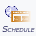
<style>
.page{position:relative;width:36px;height:36px;background:#f7f8fa}
.page>*{position:absolute;margin:0}
.t1{font:8px "Verdana";font-variant:small-caps;font-style:italic}
</style>
<div class="page">
<p class="t1" style="left:2px;top:26px;width:33px;height:6px">Schedule</p>
</div>
